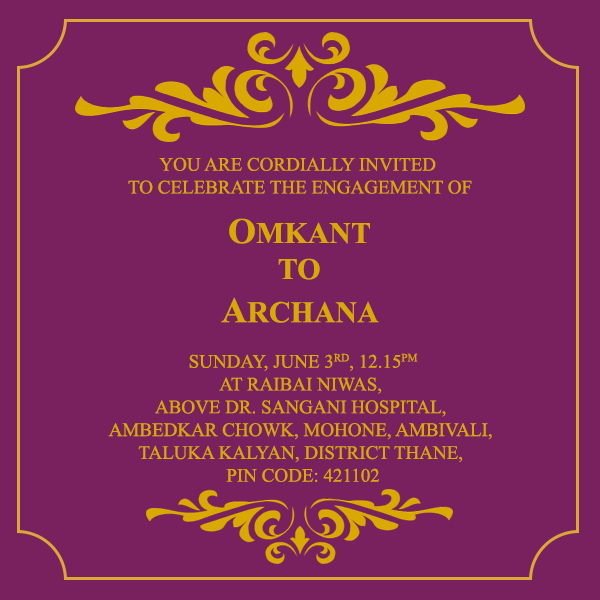
<style>
.page{position:relative;width:600px;height:600px;background:#79215e}
.page>*{position:absolute;margin:0}
.t1{font:19px "TimesNewRomanPSMT";color:#d9a900}
.t2{font:30px "TimesNewRomanPS-BoldMT";color:#d9a900}
.t3{font:36px "TimesNewRomanPS-BoldMT";color:#d9a900}
</style>
<div class="page">
<p class="t1" style="left:128px;top:157px;width:344px;height:37px;text-align:center">YOU ARE CORDIALLY INVITED <br>TO CELEBRATE THE ENGAGEMENT OF</p>
<p class="t2" style="left:221px;top:218px;width:158px;height:105px;text-align:center"><span class="t3">O</span>MKANT<br>TO<br><span class="t3">A</span>RCHANA</p>
<p class="t1" style="left:108px;top:353px;width:384px;height:129px;text-align:center">SUNDAY, JUNE 3RD, 12.15PM<br>AT RAIBAI NIWAS, <br>ABOVE DR. SANGANI HOSPITAL, <br>AMBEDKAR CHOWK, MOHONE, AMBIVALI, <br>TALUKA KALYAN, DISTRICT THANE, <br>PIN CODE: 421102</p>
</div>
